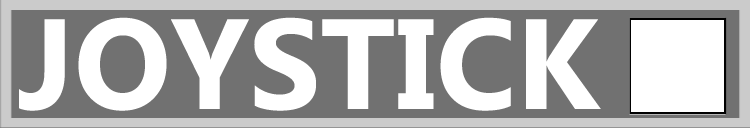
<style>
.page{position:relative;width:750px;height:128px;background:#717171}
.page>*{position:absolute;margin:0}
.t1{font:128px "Gadugi-Bold";color:#ffffff}
</style>
<div class="page">
<p class="t1" style="left:19px;top:17px;width:582px;height:94px">JOYSTICK</p>
</div>
